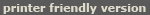
<style>
.page{position:relative;width:150px;height:15px;background:#5a5a5a}
.page>*{position:absolute;margin:0}
.t1{font:11px "Verdana-Bold";color:#dedbcb}
</style>
<div class="page">
<p class="t1" style="left:3px;top:3px;width:143px;height:11px">printer friendly version</p>
</div>
